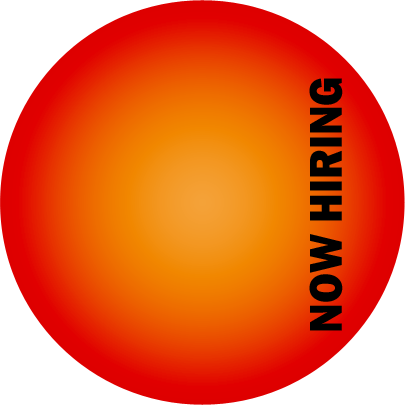
<style>
.page{position:relative;width:405px;height:405px;background:#ffffff}
.page>*{position:absolute;margin:0}
.t1{font:47.8px "FranklinGothic-Heavy";color:#000000;scale:0.91 1}
</style>
<div class="page">
<p class="t1" style="left:309px;top:78px;width:34px;height:253px;rotate:-90deg">NOW HIRING</p>
</div>
